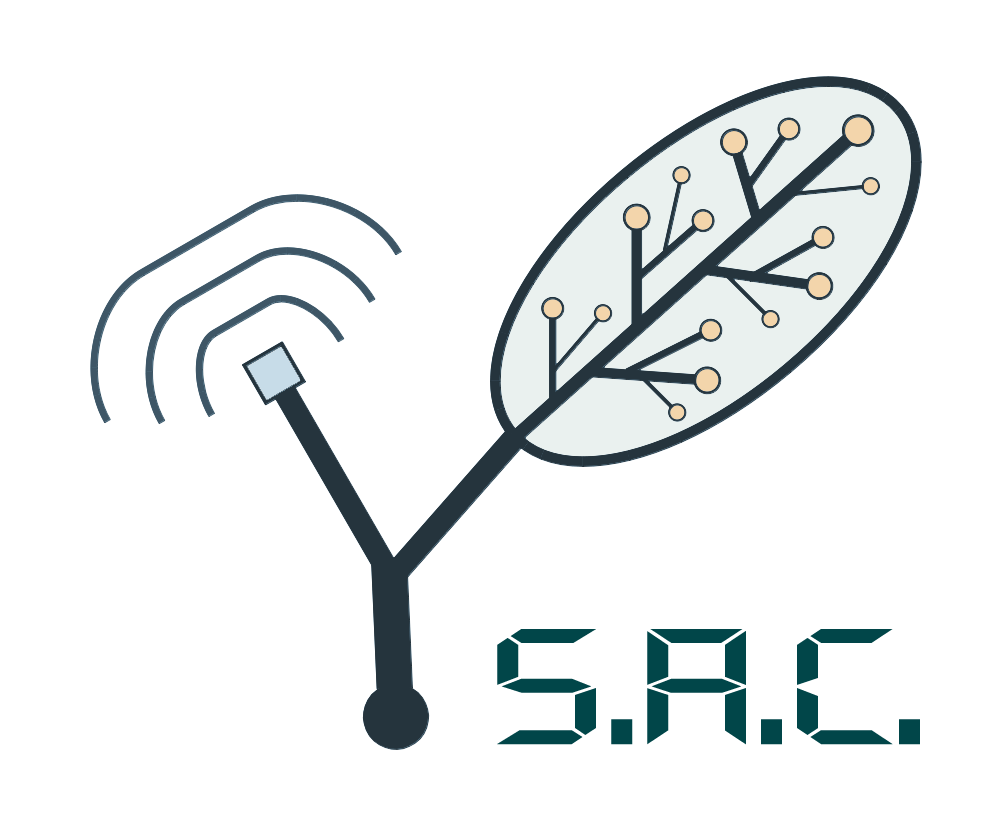
<style>
.page{position:relative;width:1000px;height:829px;background:#ffffff}
.page>*{position:absolute;margin:0}
.t1{font:160px "DigifaceWide";color:#014649}
</style>
<div class="page">
<p class="t1" style="left:497px;top:629px;width:423px;height:116px">S.A.C.</p>
</div>
